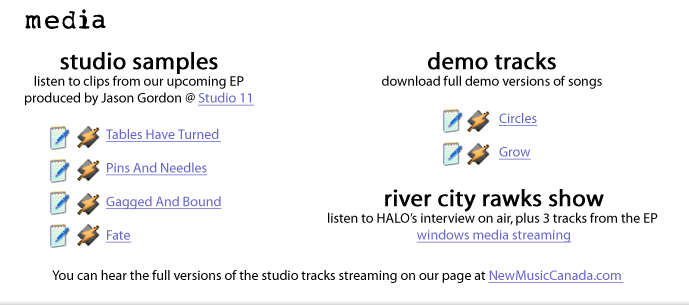
<style>
.page{position:relative;width:689px;height:305px;background:#ffffff}
.page>*{position:absolute;margin:0}
.t1{font:26px "My-type-of-font";color:#000000;font-weight:bold}
.t2{font:14px "Myriad-Roman";color:#000000}
.t3{font:24px "Myriad-Roman";color:#000000;font-weight:bold}
.t4{font:14px "Myriad-Roman";color:#6766cc;text-decoration:underline}
</style>
<div class="page">
<p class="t1" style="left:25px;top:9px;width:81px;height:20px">media</p>
<p class="t2" style="left:25px;top:52px;width:229px;height:54px;text-align:center"><span class="t3">studio samples<br></span>listen to clips from our upcoming EP<br>produced by Jason Gordon @ <span class="t4">Studio 11</span></p>
<p class="t2" style="left:382px;top:52px;width:220px;height:37px;text-align:center"><span class="t3">demo tracks<br></span>download full demo versions of songs</p>
<p class="t2" style="left:328px;top:189px;width:330px;height:54px;text-align:center"><span class="t3">river city rawks show<br></span>listen to HALO’s interview on air, plus 3 tracks from the EP<br><span class="t4">windows media streaming</span></p>
<p class="t2" style="left:52px;top:270px;width:572px;height:13px">You can hear the full versions of the studio tracks streaming on our page at <span class="t4">NewMusicCanada.com</span></p>
</div>
